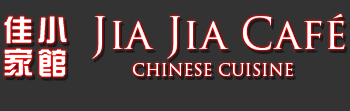
<style>
.page{position:relative;width:350px;height:111px;background:#333333}
.page>*{position:absolute;margin:0}
.t1{font:42.4px "TrajanPro-Regular";color:#ffffff}
.t2{font:16.3px "TrajanPro-Regular";color:#ffffff}
</style>
<div class="page">
<p class="t1" style="left:92px;top:14px;width:253px;height:45px">Jia Jia Café</p>
<p class="t2" style="left:133px;top:63px;width:160px;height:13px">CHINESE CUISINE</p>
</div>
